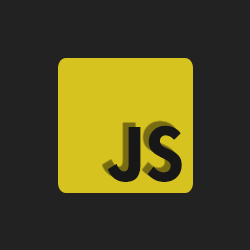
<style>
.page{position:relative;width:250px;height:250px;background:#222222}
.page>*{position:absolute;margin:0}
.t1{font:70px "Geometric212BT-HeavyCondensed";color:#222222;text-transform:uppercase}
</style>
<div class="page">
<p class="t1" style="left:107px;top:125px;width:75px;height:57px">JS</p>
</div>
